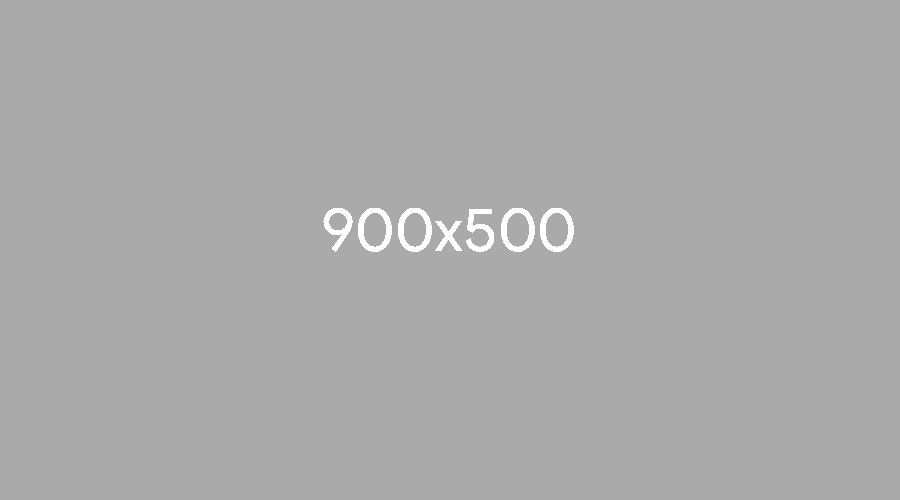
<style>
.page{position:relative;width:900px;height:500px;background:#aaaaaa}
.page>*{position:absolute;margin:0}
.t1{font:62.1px "ProductSans-Regular";color:#ffffff}
</style>
<div class="page">
<p class="t1" style="left:323px;top:208px;width:251px;height:44px">900x500</p>
</div>
